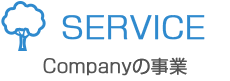
<style>
.page{position:relative;width:230px;height:81px;background:#ffffff}
.page>*{position:absolute;margin:0}
.t1{font:30px "ShinGoPro-Light";color:#2f8ace;font-weight:bold}
.t2{font:18px "ShinGoPro-Light";color:#545454;font-weight:bold}
</style>
<div class="page">
<p class="t1" style="left:62px;top:15px;width:143px;height:25px">SERVICE</p>
<p class="t2" style="left:43px;top:57px;width:144px;height:19px">Companyの事業</p>
</div>
